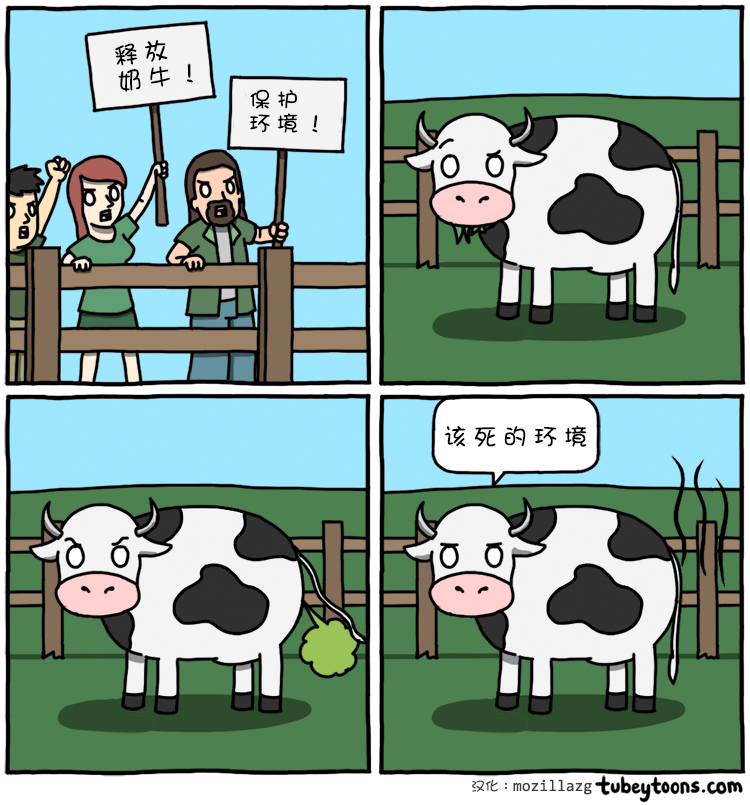
<style>
.page{position:relative;width:750px;height:805px}
.page>*{position:absolute;margin:0}
.t1{font:24px/26px "DFGirl";letter-spacing:0.26em;color:#000000}
.t2{font:22px/24px "DFGirl";letter-spacing:0.26em;color:#000000}
.t3{font:24px "DFGirl";letter-spacing:0.26em;color:#000000}
</style>
<div class="page">
<p class="t1" style="left:115px;top:40px;width:78px;height:52px;rotate:-7deg">释放<br>奶牛！</p>
<p class="t2" style="left:250px;top:89px;width:68px;height:44px">保护<br>环境！</p>
<p class="t3" style="left:445px;top:425px;width:142px;height:22px">该死的环境</p>
</div>
